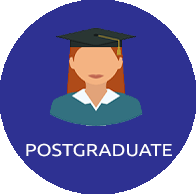
<style>
.page{position:relative;width:196px;height:194px;background:#2e3192}
.page>*{position:absolute;margin:0}
.t1{font:17.2px "Ubuntu";color:#ffffff;scale:1.14 1}
</style>
<div class="page">
<p class="t1" style="left:26px;top:143px;width:146px;height:14px">POSTGRADUATE</p>
</div>
